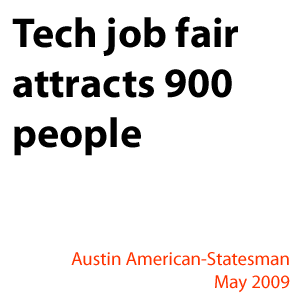
<style>
.page{position:relative;width:300px;height:300px;background:#ffffff}
.page>*{position:absolute;margin:0}
.t1{font:41.8px "MyriadPro-Bold";color:#000000}
.t2{font:18.9px "MyriadPro-Regular";color:#ff3300}
</style>
<div class="page">
<p class="t1" style="left:12px;top:16px;width:226px;height:140px">Tech job fair <br>attracts 900<br>people</p>
<p class="t2" style="left:71px;top:252px;width:219px;height:41px;text-align:right">Austin American-Statesman<br>May 2009</p>
</div>
